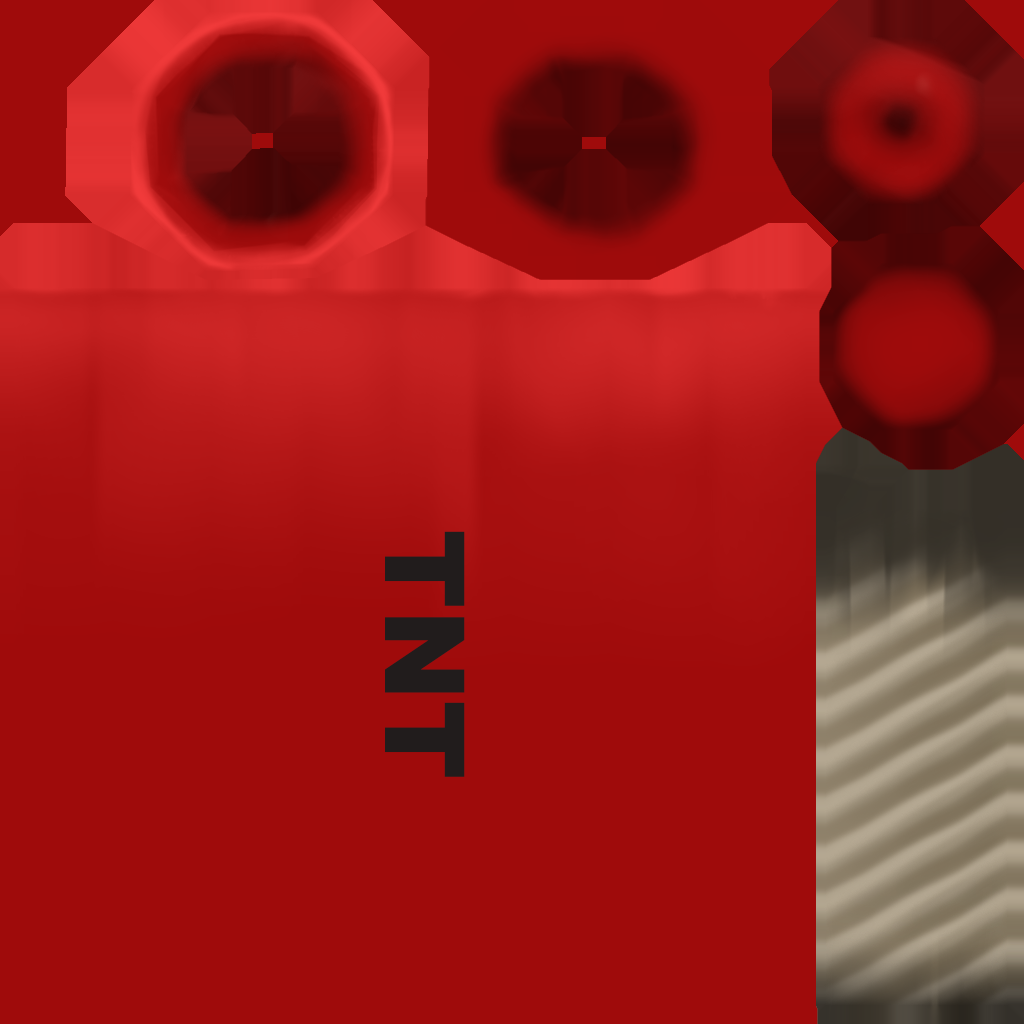
<style>
.page{position:relative;width:1024px;height:1024px;background:#9f0b0b}
.page>*{position:absolute;margin:0}
.t1{font:110.8px "Arial-Black";color:#211c1c}
</style>
<div class="page">
<p class="t1" style="left:385px;top:531px;width:80px;height:246px;rotate:90deg">TNT</p>
</div>
